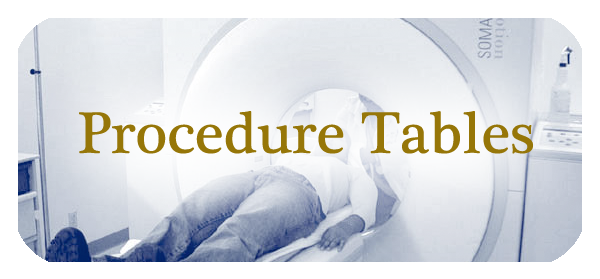
<style>
.page{position:relative;width:600px;height:279px}
.page>*{position:absolute;margin:0}
.t1{font:60px "PlantagenetCherokee";color:#967608}
</style>
<div class="page">
<p class="t1" style="left:79px;top:111px;width:454px;height:43px">Procedure Tables</p>
</div>
